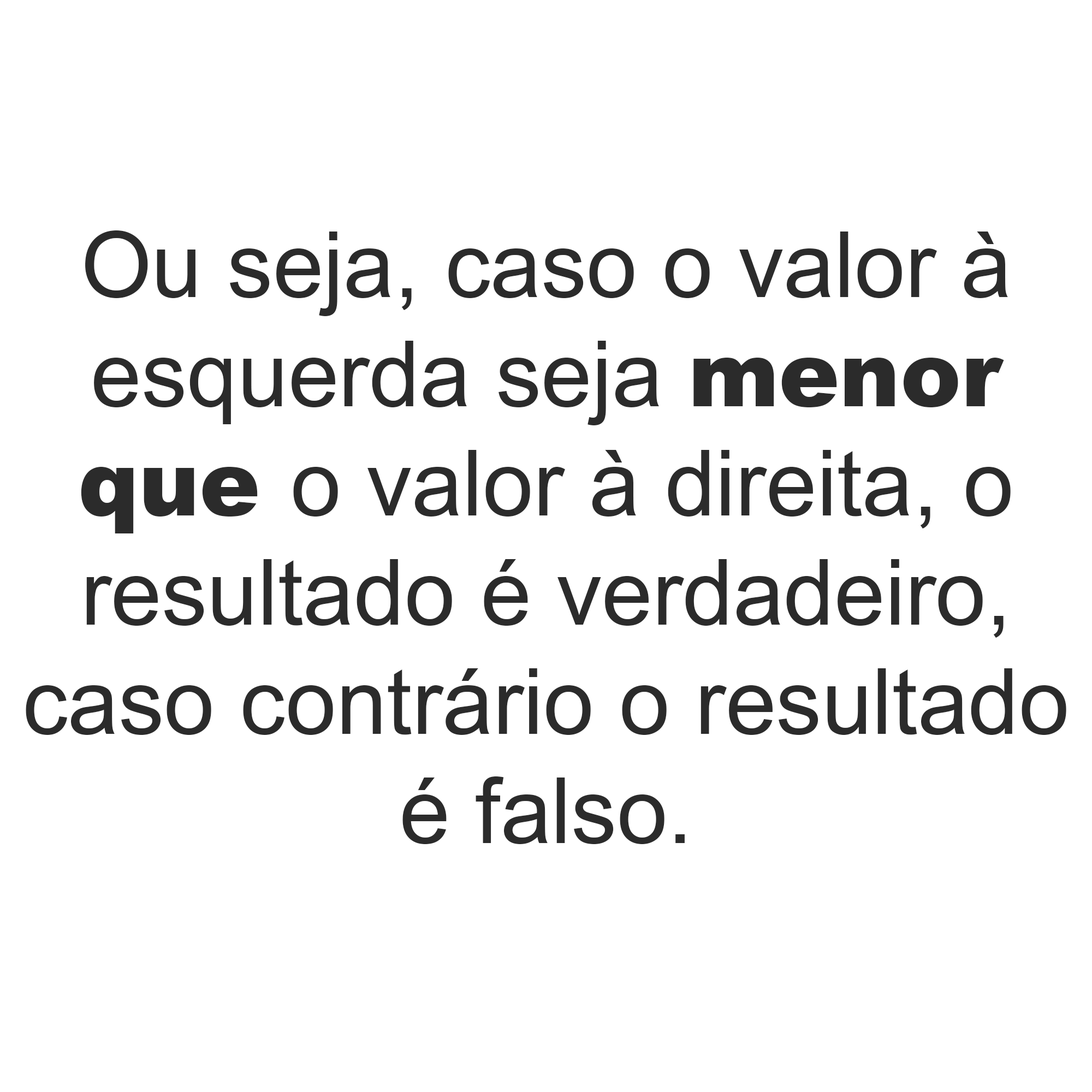
<style>
.page{position:relative;width:1092px;height:1092px;background:#ffffff}
.page>*{position:absolute;margin:0}
.t1{font:91px "ArialMT";color:#2b2b2b}
.t2{font:91px "Arial-Black";color:#2b2b2b}
</style>
<div class="page">
<p class="t1" style="left:26px;top:230px;width:1040px;height:614px;text-align:center">Ou seja, caso o valor à<br>esquerda seja <span class="t2">menor<br>que </span>o valor à direita, o<br>resultado é verdadeiro,<br>caso contrário o resultado<br>é falso.</p>
</div>
